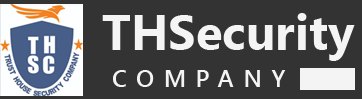
<style>
.page{position:relative;width:362px;height:99px;background:#333333}
.page>*{position:absolute;margin:0}
.t1{font:49px "SegoeUI-Bold";color:#f4f4f4}
.t2{font:24px "SegoeUI-Semibold";letter-spacing:0.4em;color:#f4f4f4}
</style>
<div class="page">
<p class="t1" style="left:102px;top:13px;width:253px;height:48px">THSecurity</p>
<p class="t2" style="left:113px;top:70px;width:173px;height:17px">COMPANY</p>
</div>
